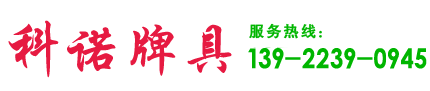
<style>
.page{position:relative;width:430px;height:91px;background:#ffffff}
.page>*{position:absolute;margin:0}
.t1{font:59px "STXingkai";color:#e61a41}
.t2{font:25px "hzgb";color:#00b500}
</style>
<div class="page">
<p class="t1" style="left:8px;top:20px;width:224px;height:58px">科诺牌具</p>
<p class="t2" style="left:248px;top:48px;width:179px;height:21px">139-2239-0945</p>
</div>
